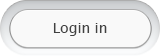
<style>
.page{position:relative;width:160px;height:56px;background:#f9f9f9}
.page>*{position:absolute;margin:0}
.t1{font:14px "LucidaSansUnicode";color:#414141}
</style>
<div class="page">
<p class="t1" style="left:53px;top:23px;width:54px;height:13px">Login in</p>
</div>
